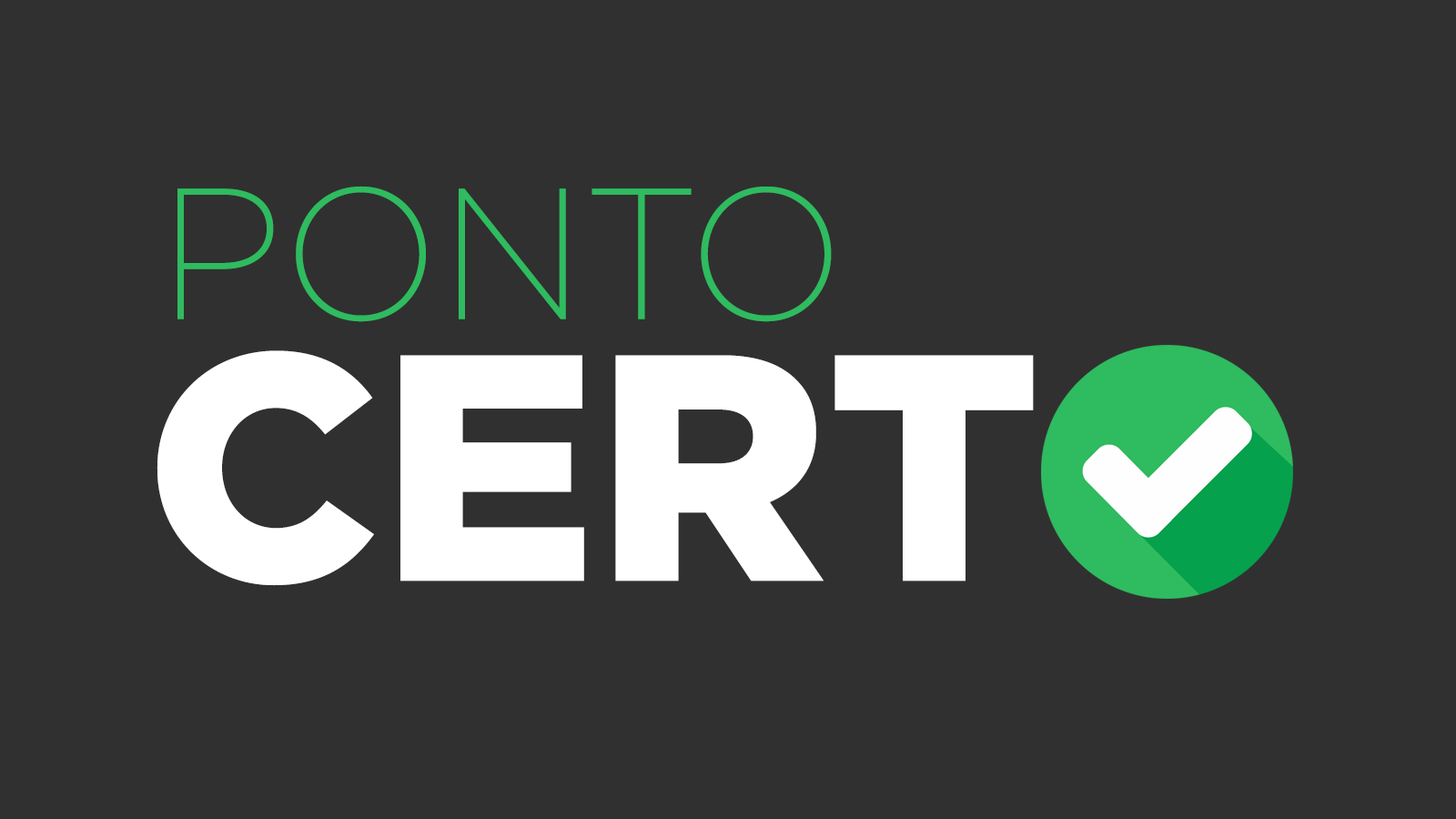
<style>
.page{position:relative;width:1456px;height:819px;background:#303030}
.page>*{position:absolute;margin:0}
.t1{font:186.1px "Gotham-XLight";color:#2fbb5f}
.t2{font:321.8px "Gotham-Black";color:#ffffff}
</style>
<div class="page">
<p class="t1" style="left:177px;top:186px;width:655px;height:136px">PONTO</p>
<p class="t2" style="left:157px;top:350px;width:1130px;height:236px">CERTO</p>
</div>
